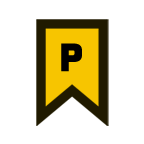
<style>
.page{position:relative;width:144px;height:144px;background:#ffffff}
.page>*{position:absolute;margin:0}
.t1{font:40px "CPMono-Black";color:#000000}
</style>
<div class="page">
<p class="t1" style="left:61px;top:43px;width:21px;height:29px">P</p>
</div>
